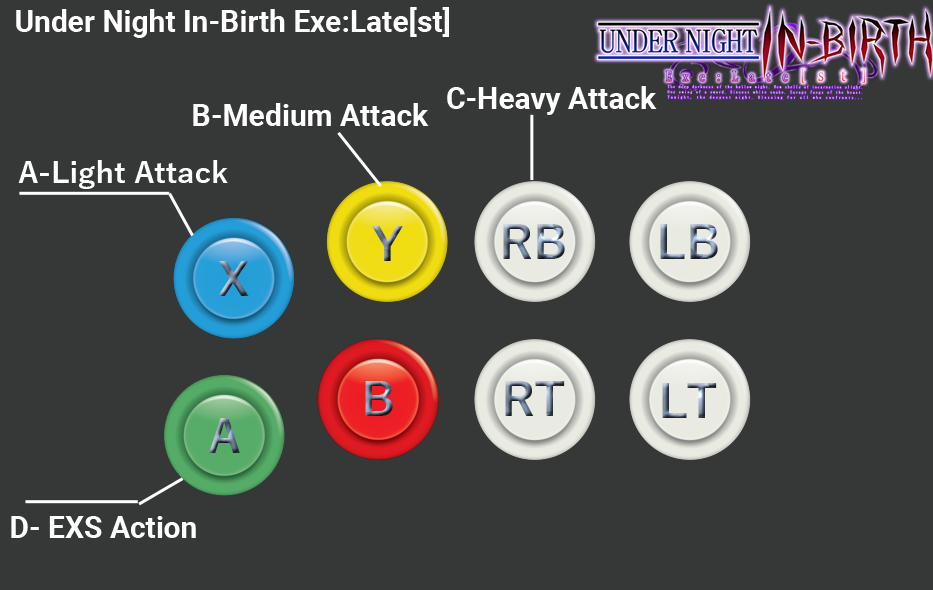
<style>
.page{position:relative;width:933px;height:590px;background:#363838}
.page>*{position:absolute;margin:0}
.t1{font:30px "Roboto-Bold";color:#ffffff}
.t2{font:30px "YuGothic-Bold";color:#ffffff}
</style>
<div class="page">
<p class="t1" style="left:16px;top:7px;width:433px;height:31px">Under Night In-Birth Exe:Late[st]</p>
<p class="t1" style="left:447px;top:86px;width:210px;height:29px">C-Heavy Attack</p>
<p class="t1" style="left:193px;top:103px;width:236px;height:23px">B-Medium Attack</p>
<p class="t2" style="left:18px;top:160px;width:210px;height:29px">A-Light Attack</p>
<p class="t1" style="left:11px;top:516px;width:185px;height:22px">D- EXS Action</p>
</div>
